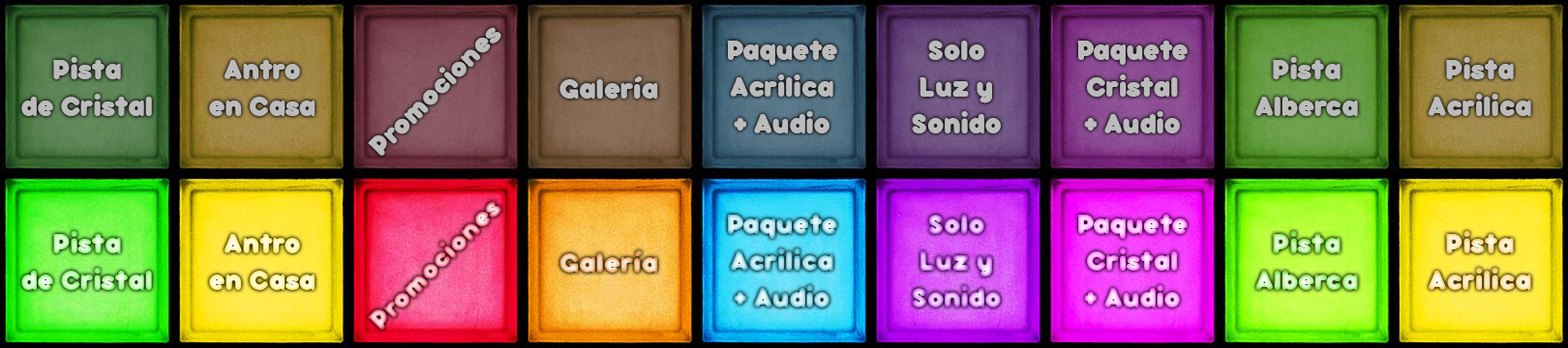
<style>
.page{position:relative;width:1568px;height:348px}
.page>*{position:absolute;margin:0}
.t1{font:30.5px "bubbleboddy-Fat";color:#bbbbbb}
.t2{font:30.5px "bubbleboddy-Fat"}
</style>
<div class="page">
<p class="t1" style="left:368px;top:27px;width:133px;height:129px;rotate:-45deg">Promociones</p>
<p class="t1" style="left:727px;top:41px;width:110px;height:93px;text-align:center">Paquete<br>Acrilica<br>+ Audio</p>
<p class="t1" style="left:912px;top:41px;width:89px;height:93px;text-align:center">Solo<br>Luz y<br>Sonido</p>
<p class="t1" style="left:1077px;top:41px;width:111px;height:93px;text-align:center">Paquete<br>Cristal<br>+ Audio</p>
<p class="t1" style="left:21px;top:57px;width:131px;height:59px;text-align:center">Pista<br>de Cristal</p>
<p class="t1" style="left:209px;top:60px;width:107px;height:56px;text-align:center">Antro<br>en Casa</p>
<p class="t1" style="left:1255px;top:57px;width:103px;height:59px;text-align:center">Pista<br>Alberca</p>
<p class="t1" style="left:1429px;top:57px;width:102px;height:59px;text-align:center">Pista<br>Acrilica</p>
<p class="t1" style="left:559px;top:76px;width:99px;height:23px">Galería</p>
<p class="t2" style="left:368px;top:201px;width:133px;height:129px;rotate:-45deg">Promociones</p>
<p class="t2" style="left:727px;top:215px;width:110px;height:93px;text-align:center">Paquete<br>Acrilica<br>+ Audio</p>
<p class="t2" style="left:912px;top:215px;width:89px;height:93px;text-align:center">Solo<br>Luz y<br>Sonido</p>
<p class="t2" style="left:1077px;top:215px;width:111px;height:93px;text-align:center">Paquete<br>Cristal<br>+ Audio</p>
<p class="t2" style="left:21px;top:231px;width:131px;height:59px;text-align:center">Pista<br>de Cristal</p>
<p class="t2" style="left:1255px;top:231px;width:103px;height:59px;text-align:center">Pista<br>Alberca</p>
<p class="t2" style="left:1429px;top:231px;width:102px;height:59px;text-align:center">Pista<br>Acrilica</p>
<p class="t2" style="left:209px;top:234px;width:107px;height:56px;text-align:center">Antro<br>en Casa</p>
<p class="t2" style="left:559px;top:251px;width:99px;height:22px">Galería</p>
</div>
